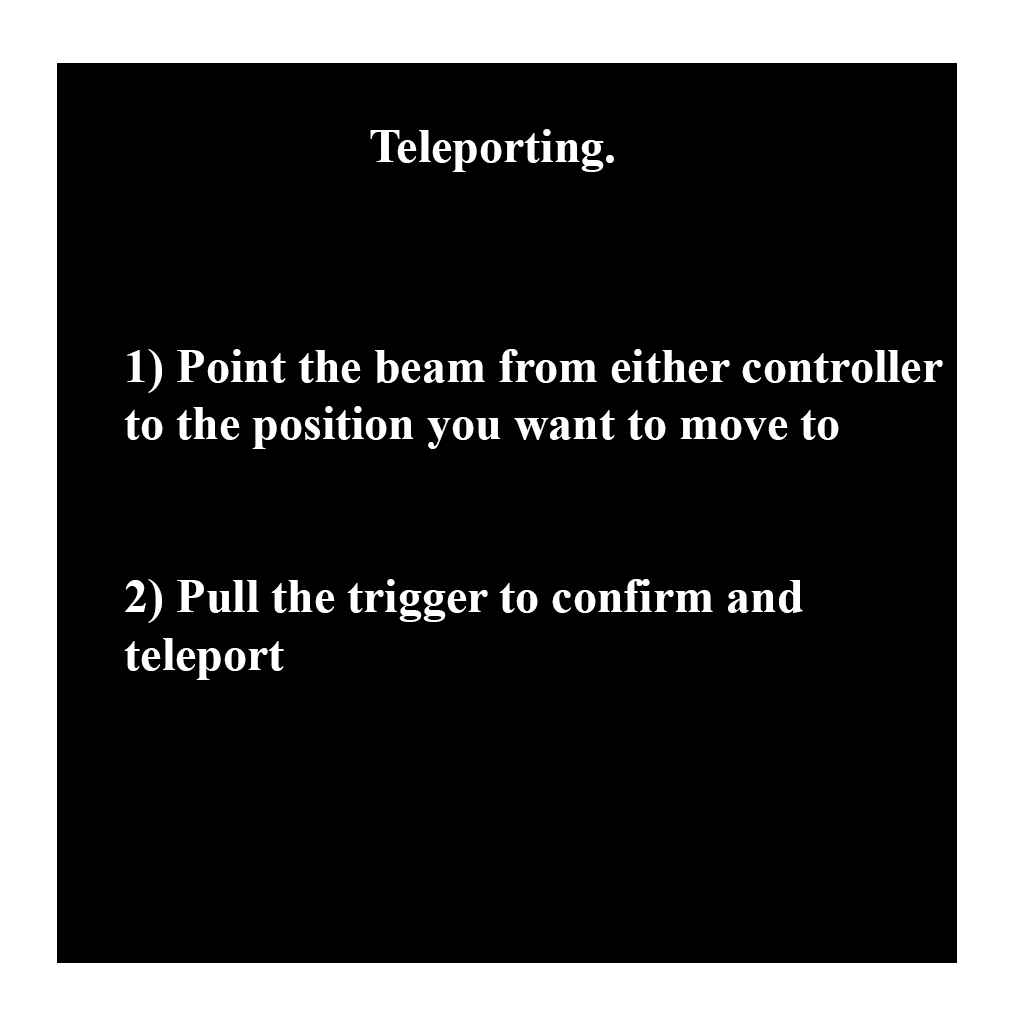
<style>
.page{position:relative;width:1024px;height:1024px;background:#000000}
.page>*{position:absolute;margin:0}
.t1{font:48px "TimesNewRomanPS-BoldMT";color:#ffffff}
</style>
<div class="page">
<p class="t1" style="left:370px;top:129px;width:244px;height:43px">Teleporting.</p>
<p class="t1" style="left:124px;top:349px;width:819px;height:331px">1) Point the beam from either controller<br>to the position you want to move to<br><br><br>2) Pull the trigger to confirm and <br>teleport</p>
</div>
